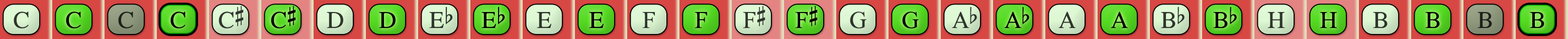
<style>
.page{position:relative;width:1568px;height:39px}
.page>*{position:absolute;margin:0}
.t1{font:24.1px "OpusChords";color:#30362e}
.t2{font:24.1px "OpusChords";color:#000000}
.t3{font:24.1px "OpusChords";color:#1f211b}
.t4{font:24.1px "OpusChords";color:#2f352d}
.t5{font:24.1px "OpusChords";color:#30352d}
.t6{font:24.1px "OpusChords";letter-spacing:-0.05em;color:#2f352d}
.t7{font:24.1px "OpusChords";letter-spacing:-0.05em;color:#000000}
</style>
<div class="page">
<p class="t1" style="left:14px;top:12px;width:15px;height:17px">C</p>
<p class="t2" style="left:66px;top:12px;width:15px;height:17px">C</p>
<p class="t3" style="left:118px;top:12px;width:15px;height:17px">C</p>
<p class="t2" style="left:170px;top:12px;width:15px;height:17px">C</p>
<p class="t4" style="left:219px;top:6px;width:24px;height:23px">C#</p>
<p class="t2" style="left:271px;top:6px;width:25px;height:23px">C#</p>
<p class="t4" style="left:327px;top:12px;width:16px;height:16px">D</p>
<p class="t2" style="left:379px;top:12px;width:17px;height:16px">D</p>
<p class="t5" style="left:429px;top:7px;width:24px;height:21px">Eb</p>
<p class="t2" style="left:481px;top:7px;width:24px;height:21px">Eb</p>
<p class="t1" style="left:537px;top:12px;width:14px;height:16px">E</p>
<p class="t2" style="left:589px;top:12px;width:15px;height:16px">E</p>
<p class="t1" style="left:642px;top:12px;width:13px;height:16px">F</p>
<p class="t2" style="left:695px;top:12px;width:12px;height:16px">F</p>
<p class="t5" style="left:743px;top:6px;width:22px;height:22px">F#</p>
<p class="t2" style="left:795px;top:6px;width:23px;height:22px">F#</p>
<p class="t4" style="left:850px;top:12px;width:16px;height:17px">G</p>
<p class="t2" style="left:902px;top:12px;width:17px;height:17px">G</p>
<p class="t6" style="left:952px;top:7px;width:25px;height:21px">Ab</p>
<p class="t7" style="left:1004px;top:7px;width:25px;height:21px">Ab</p>
<p class="t4" style="left:1058px;top:12px;width:17px;height:16px">A</p>
<p class="t2" style="left:1111px;top:12px;width:17px;height:16px">A</p>
<p class="t5" style="left:1161px;top:7px;width:24px;height:21px">Bb</p>
<p class="t2" style="left:1213px;top:7px;width:24px;height:21px">Bb</p>
<p class="t5" style="left:1267px;top:12px;width:18px;height:16px">H</p>
<p class="t2" style="left:1320px;top:12px;width:17px;height:16px">H</p>
<p class="t5" style="left:1373px;top:12px;width:15px;height:16px">B</p>
<p class="t2" style="left:1425px;top:12px;width:15px;height:16px">B</p>
<p class="t3" style="left:1478px;top:12px;width:14px;height:16px">B</p>
<p class="t2" style="left:1530px;top:12px;width:14px;height:16px">B</p>
</div>
